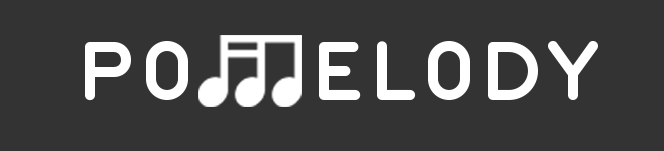
<style>
.page{position:relative;width:664px;height:151px;background:#333333}
.page>*{position:absolute;margin:0}
.t1{font:100.5px "SantJoanDespi-Regular";letter-spacing:0.06em;color:#ffffff}
</style>
<div class="page">
<p class="t1" style="left:85px;top:41px;width:103px;height:60px">p0</p>
<p class="t1" style="left:319px;top:41px;width:279px;height:59px">el0dy</p>
</div>
